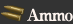
<style>
.page{position:relative;width:73px;height:24px;background:#333333}
.page>*{position:absolute;margin:0}
.t1{font:16px "RyuminPro-ExBold";letter-spacing:-0.08em;color:#fcf3ee}
</style>
<div class="page">
<p class="t1" style="left:27px;top:8px;width:46px;height:14px">Ammo</p>
</div>
